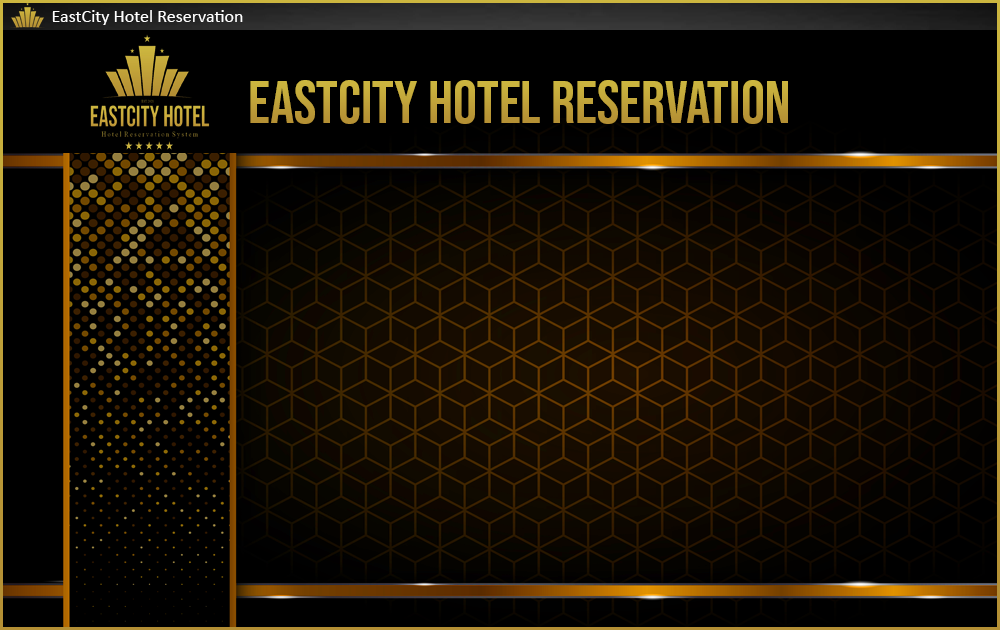
<style>
.page{position:relative;width:1000px;height:630px;background:#000000}
.page>*{position:absolute;margin:0}
.t1{font:18px "Calibri";color:#ffffff}
</style>
<div class="page">
<p class="t1" style="left:52px;top:10px;width:191px;height:15px">EastCity Hotel Reservation</p>
</div>
